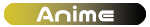
<style>
.page{position:relative;width:150px;height:27px;background:#ffffff}
.page>*{position:absolute;margin:0}
.t1{font:24px "NicoKaku";color:#ffffff}
</style>
<div class="page">
<p class="t1" style="left:36px;top:5px;width:78px;height:17px">Anime</p>
</div>
